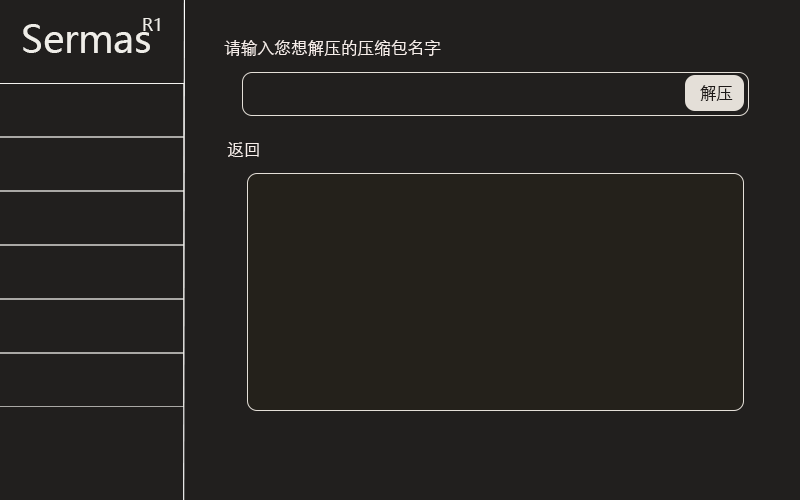
<style>
.page{position:relative;width:800px;height:500px;background:#211f1e}
.page>*{position:absolute;margin:0}
.t1{font:37.5px "MicrosoftYaHeiUI";color:#efede8}
.t2{font:16.7px "MicrosoftYaHeiUI";color:#efede8}
.t3{font:16.7px "DengXian";color:#f6ede9}
.t4{font:16.7px "DengXian";color:#1d1917}
</style>
<div class="page">
<p class="t1" style="left:23px;top:24px;width:127px;height:29px">Sermas</p>
<p class="t2" style="left:143px;top:18px;width:17px;height:13px">R1</p>
<p class="t3" style="left:224px;top:40px;width:217px;height:16px">请输入您想解压的压缩包名字</p>
<p class="t4" style="left:700px;top:85px;width:33px;height:16px">解压</p>
<p class="t3" style="left:227px;top:142px;width:32px;height:15px">返回</p>
</div>
